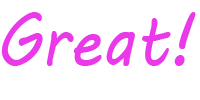
<style>
.page{position:relative;width:200px;height:100px;background:#ffffff}
.page>*{position:absolute;margin:0}
.t1{font:75px "MVBoli";color:#ea39e8;scale:0.89 1}
</style>
<div class="page">
<p class="t1" style="left:1px;top:12px;width:195px;height:54px">Great!</p>
</div>
